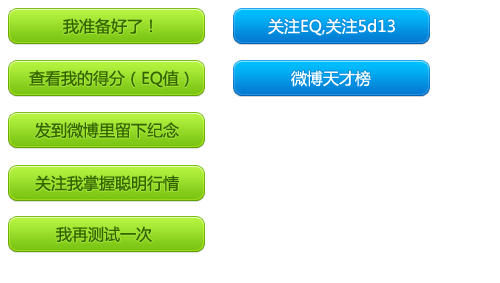
<style>
.page{position:relative;width:500px;height:283px;background:#ffffff}
.page>*{position:absolute;margin:0}
.t1{font:16px "MicrosoftYaHei";color:#336600;text-transform:uppercase}
.t2{font:16px "MicrosoftYaHei";color:#ffffff}
</style>
<div class="page">
<p class="t1" style="left:63px;top:18px;width:90px;height:17px">我准备好了！</p>
<p class="t2" style="left:268px;top:18px;width:127px;height:18px">关注EQ,关注5d13</p>
<p class="t1" style="left:29px;top:70px;width:160px;height:18px">查看我的得分（EQ值）</p>
<p class="t2" style="left:291px;top:70px;width:80px;height:17px">微博天才榜</p>
<p class="t1" style="left:35px;top:122px;width:144px;height:17px">发到微博里留下纪念</p>
<p class="t1" style="left:35px;top:175px;width:144px;height:17px">关注我掌握聪明行情</p>
<p class="t1" style="left:56px;top:226px;width:96px;height:17px">我再测试一次</p>
</div>
